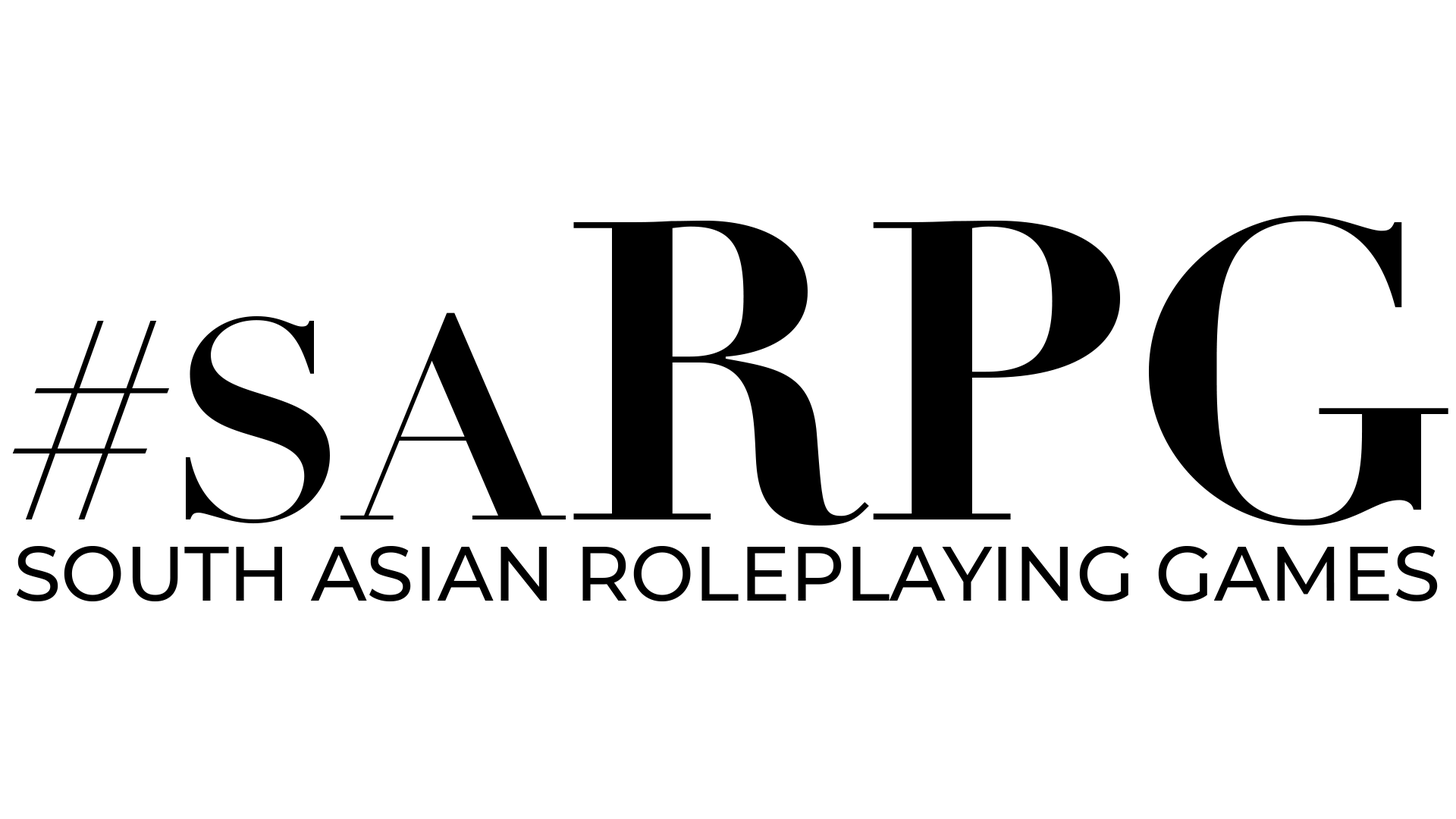
<style>
.page{position:relative;width:1456px;height:819px;background:#ffffff}
.page>*{position:absolute;margin:0}
.t1{font:278.6px "DidotLTStd-Bold";color:#000000}
.t2{font:417.9px "DidotLTStd-Bold";color:#000000}
.t3{font:76.3px "Montserrat-Medium";color:#000000}
</style>
<div class="page">
<p class="t1" style="left:12px;top:215px;width:1436px;height:311px">#SA<span class="t2">RPG</span></p>
<p class="t3" style="left:17px;top:546px;width:1421px;height:55px">SOUTH ASIAN ROLEPLAYING GAMES</p>
</div>
